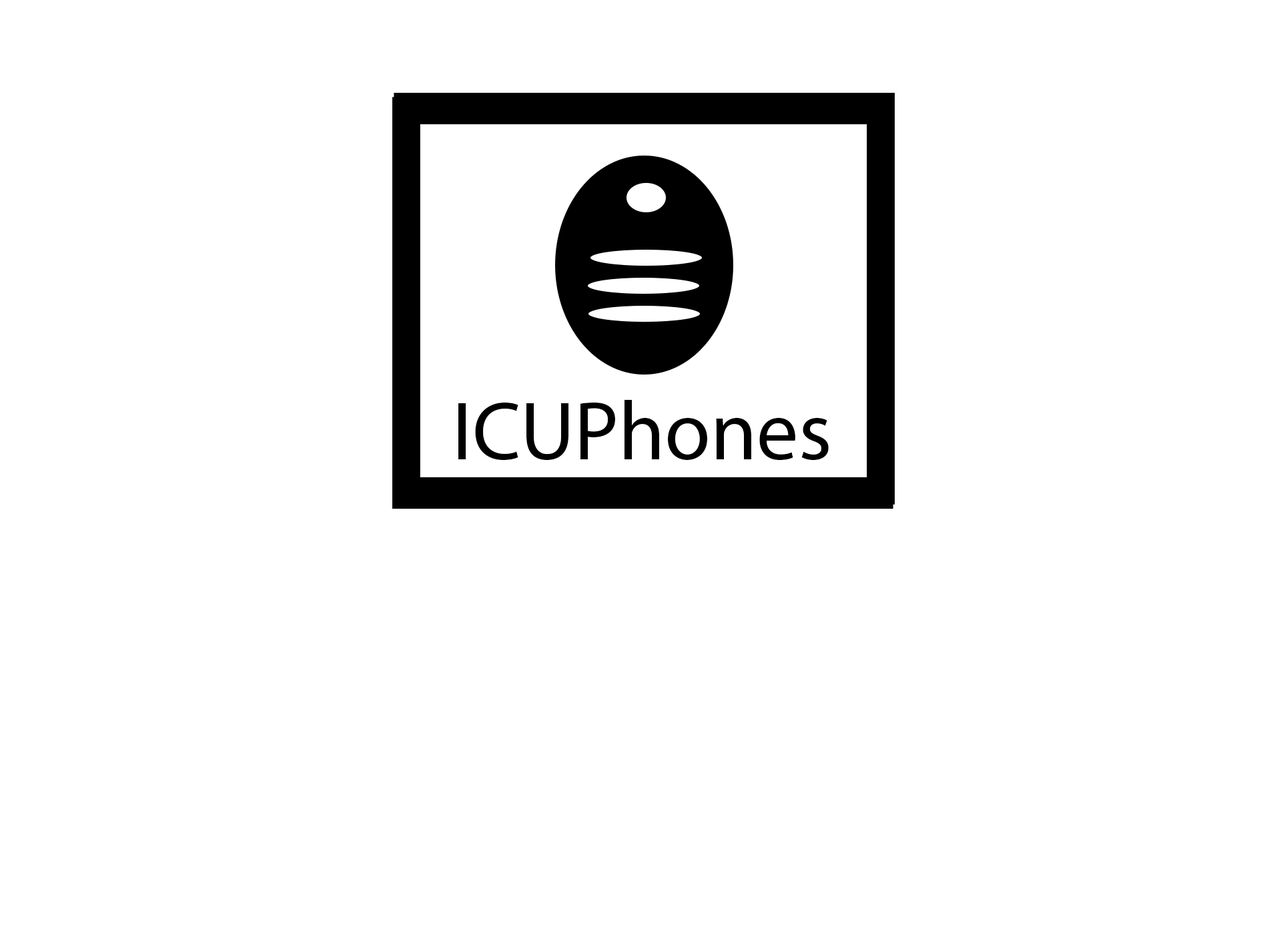
<style>
.page{position:relative;width:1261px;height:946px;background:#ffffff}
.page>*{position:absolute;margin:0}
.t1{font:83.4px "MyriadPro-Regular";color:#000000}
</style>
<div class="page">
<p class="t1" style="left:458px;top:400px;width:371px;height:60px">ICUPhones</p>
</div>
